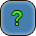
<style>
.page{position:relative;width:36px;height:36px;background:#457eaf}
.page>*{position:absolute;margin:0}
.t1{font:22px "Latha";color:#34ff0c}
</style>
<div class="page">
<p class="t1" style="left:12px;top:11px;width:10px;height:14px">?</p>
</div>
